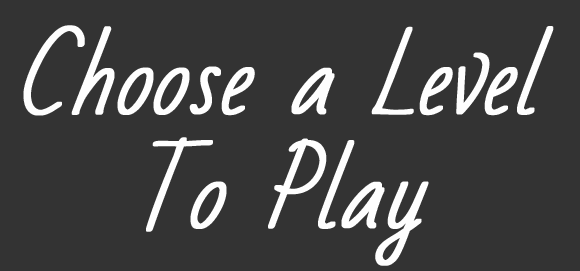
<style>
.page{position:relative;width:580px;height:271px;background:#333333}
.page>*{position:absolute;margin:0}
.t1{font:90px "BadScript-Regular";color:#fefefe;font-weight:bold;font-style:italic}
</style>
<div class="page">
<p class="t1" style="left:23px;top:25px;width:531px;height:91px">Choose a Level</p>
<p class="t1" style="left:146px;top:137px;width:283px;height:129px">To Play</p>
</div>
